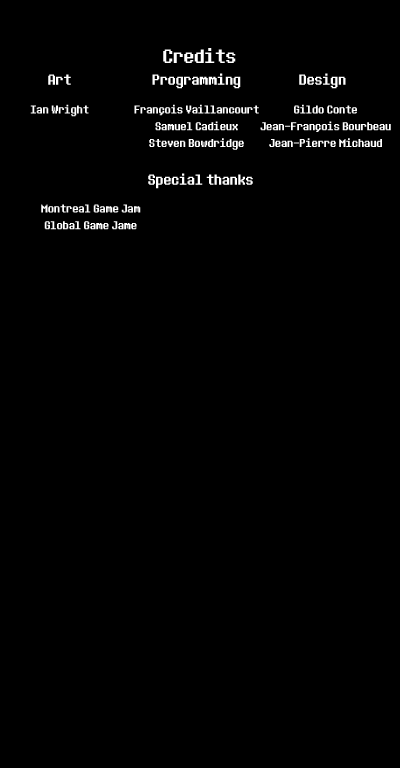
<style>
.page{position:relative;width:400px;height:768px;background:#000000}
.page>*{position:absolute;margin:0}
.t1{font:24px "8bitoperator-JVE";color:#ffffff}
.t2{font:18px "8bitoperator-JVE";color:#ffffff}
.t3{font:14px "8bitoperator-JVE";color:#ffffff}
</style>
<div class="page">
<p class="t1" style="left:163px;top:48px;width:73px;height:15px">Credits</p>
<p class="t2" style="left:48px;top:74px;width:23px;height:11px">Art</p>
<p class="t2" style="left:152px;top:73px;width:89px;height:16px">Programming</p>
<p class="t2" style="left:299px;top:73px;width:47px;height:16px">Design</p>
<p class="t3" style="left:30px;top:104px;width:59px;height:13px">Ian Wright</p>
<p class="t3" style="left:134px;top:104px;width:125px;height:46px;text-align:center">François Vaillancourt<br>Samuel Cadieux<br>Steven Bowdridge</p>
<p class="t3" style="left:260px;top:104px;width:131px;height:43px;text-align:center">Gildo Conte<br>Jean-François Bourbeau<br>Jean-Pierre Michaud</p>
<p class="t2" style="left:148px;top:173px;width:105px;height:16px">Special thanks</p>
<p class="t3" style="left:41px;top:204px;width:100px;height:26px;text-align:center">Montreal Game Jam<br>Global Game Jame</p>
</div>
